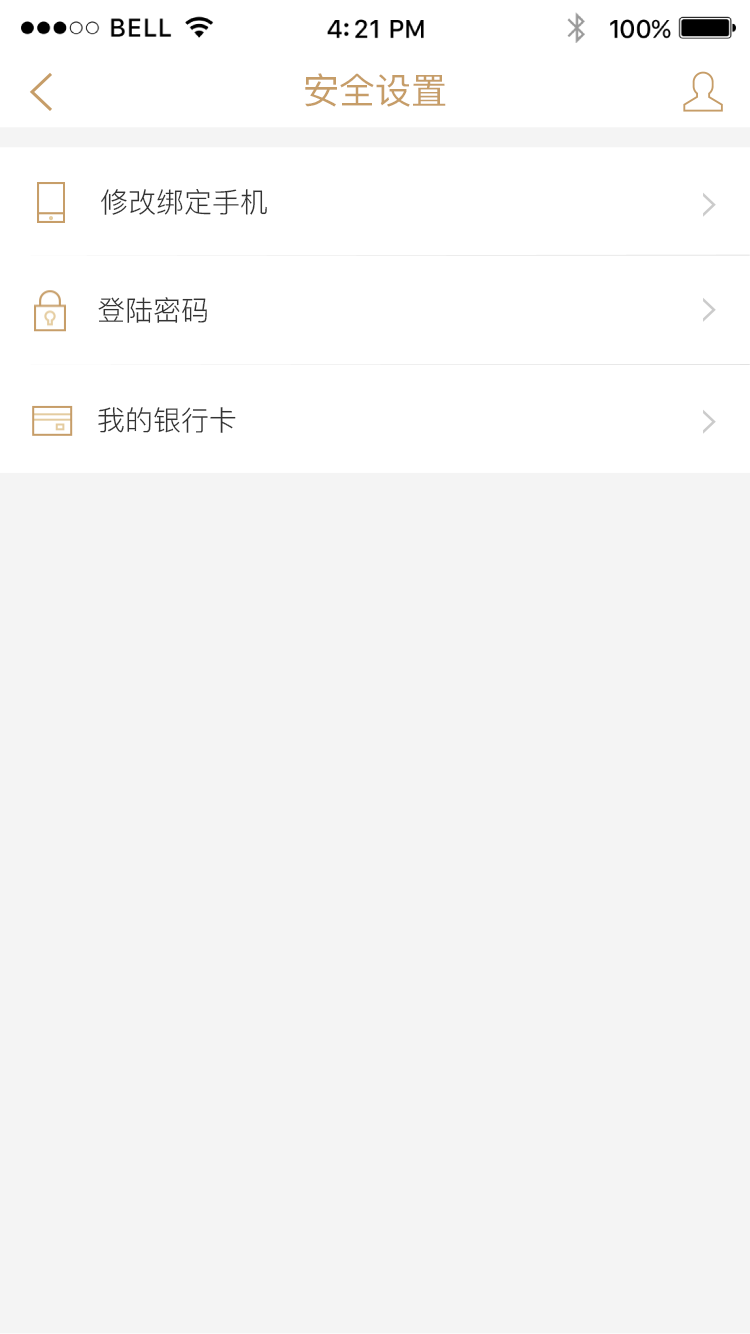
<style>
.page{position:relative;width:750px;height:1334px;background:#f4f4f4}
.page>*{position:absolute;margin:0}
.t1{font:36px "PingFangSC-Regular";color:#c69d68}
.t2{font:28px "PingFang-SC-Regular";color:#333333}
</style>
<div class="page">
<p class="t1" style="left:305px;top:73px;width:141px;height:34px">安全设置</p>
<p class="t2" style="left:101px;top:189px;width:166px;height:26px">修改绑定手机</p>
<p class="t2" style="left:98px;top:297px;width:109px;height:26px">登陆密码</p>
<p class="t2" style="left:98px;top:407px;width:138px;height:26px">我的银行卡</p>
</div>
